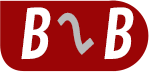
<style>
.page{position:relative;width:150px;height:72px;background:#9b0506}
.page>*{position:absolute;margin:0}
.t1{font:67.2px "ContrailOne-Regular";color:#ffffff}
.t2{font:54.8px "ContrailOne-Regular";color:#b9b9b9}
</style>
<div class="page">
<p class="t1" style="left:21px;top:7px;width:30px;height:53px">B</p>
<p class="t2" style="left:57px;top:12px;width:37px;height:43px;rotate:-40deg">2</p>
<p class="t1" style="left:104px;top:7px;width:30px;height:53px">B</p>
</div>
